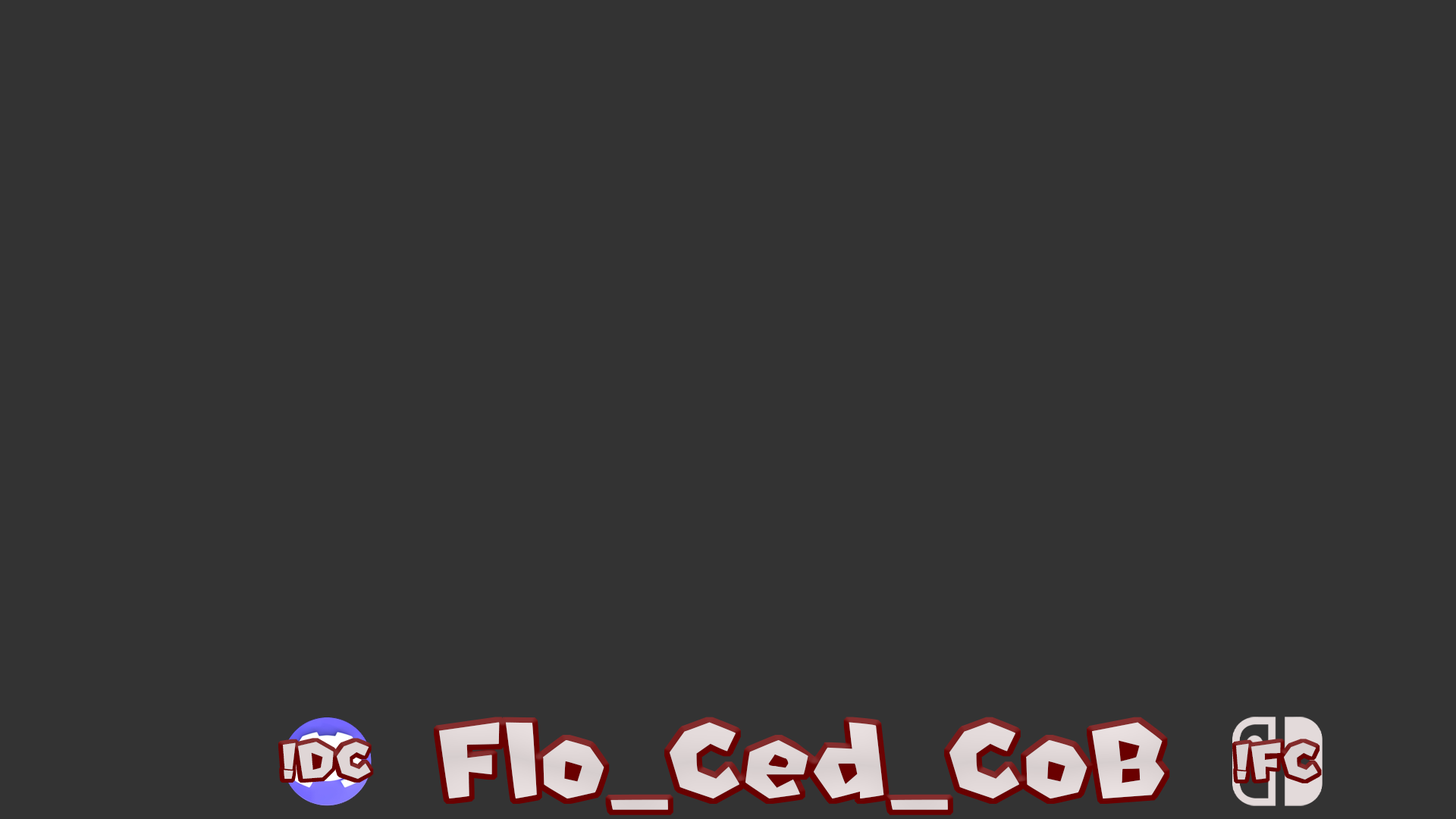
<style>
.page{position:relative;width:1456px;height:819px;background:#333333}
.page>*{position:absolute;margin:0}
.t1{font:119.8px "NewSuperMarioFontU";color:#e0d7d7}
.t2{font:58.1px "NewSuperMarioFontU";color:#dfd6d6}
.t3{font:58.1px "NewSuperMarioFontU";color:#dad1d1}
</style>
<div class="page">
<p class="t1" style="left:439px;top:722px;width:726px;height:88px">Flo_Ced_CoB</p>
<p class="t2" style="left:283px;top:742px;width:88px;height:37px">!DC</p>
<p class="t3" style="left:1236px;top:742px;width:82px;height:38px">!FC</p>
</div>
